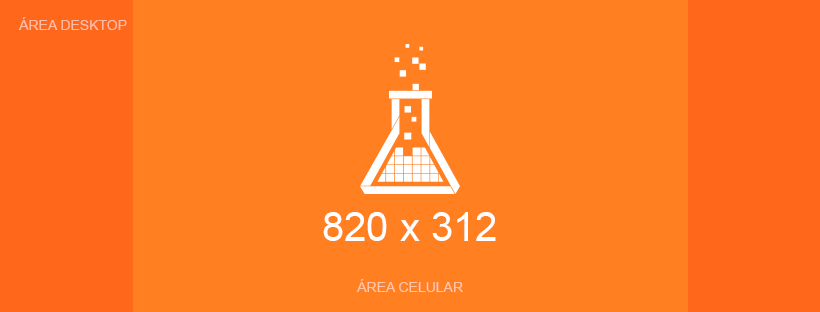
<style>
.page{position:relative;width:820px;height:312px;background:#ff7f21}
.page>*{position:absolute;margin:0}
.t1{font:14px "ArialMT";color:#ffbda8;text-transform:uppercase}
.t2{font:40px "ArialMT";color:#ffffff}
.t3{font:14px "ArialMT";color:#ffc6a9;text-transform:uppercase}
</style>
<div class="page">
<p class="t1" style="left:18px;top:17px;width:109px;height:13px">área desktop</p>
<p class="t2" style="left:323px;top:212px;width:173px;height:29px">820 x 312</p>
<p class="t3" style="left:356px;top:279px;width:107px;height:13px">área celular</p>
</div>
